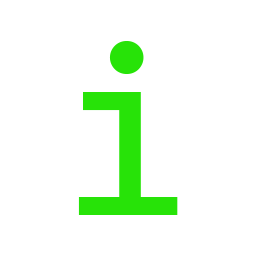
<style>
.page{position:relative;width:256px;height:256px;background:#ffffff}
.page>*{position:absolute;margin:0}
.t1{font:250px "Consolas";color:#27e308}
</style>
<div class="page">
<p class="t1" style="left:78px;top:41px;width:100px;height:174px">i</p>
</div>
